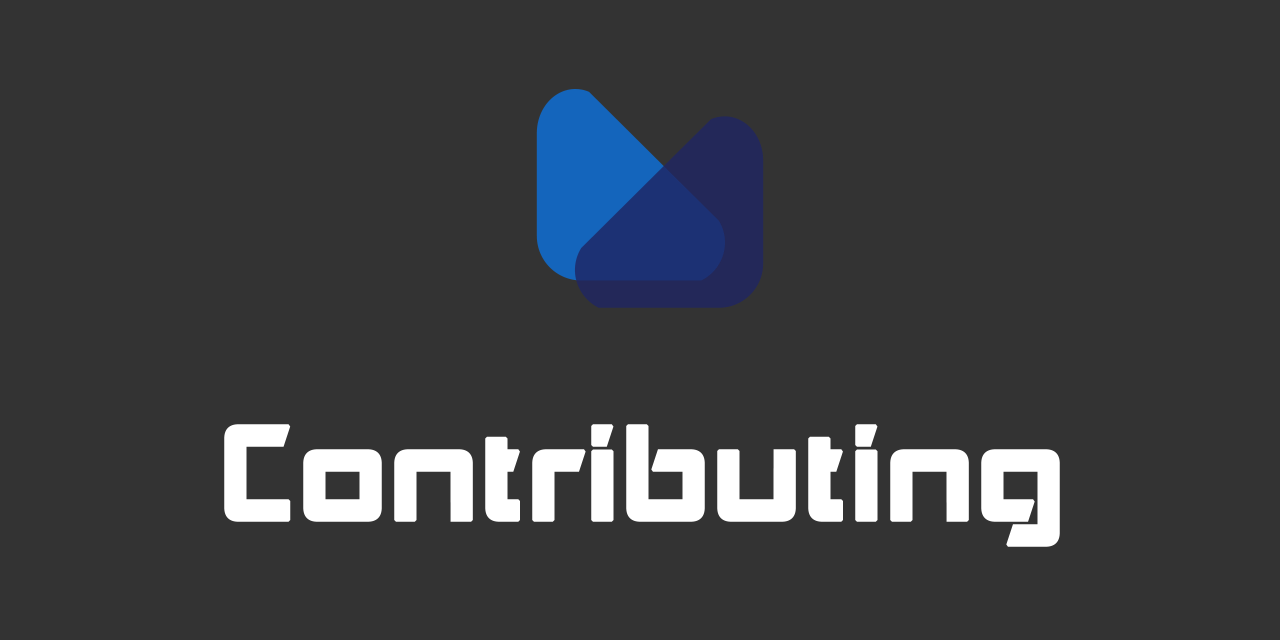
<style>
.page{position:relative;width:1280px;height:640px;background:#333333}
.page>*{position:absolute;margin:0}
.t1{font:128px "Akashi";color:#ffffff;font-weight:bold}
</style>
<div class="page">
<p class="t1" style="left:224px;top:424px;width:836px;height:123px">Contributing</p>
</div>
